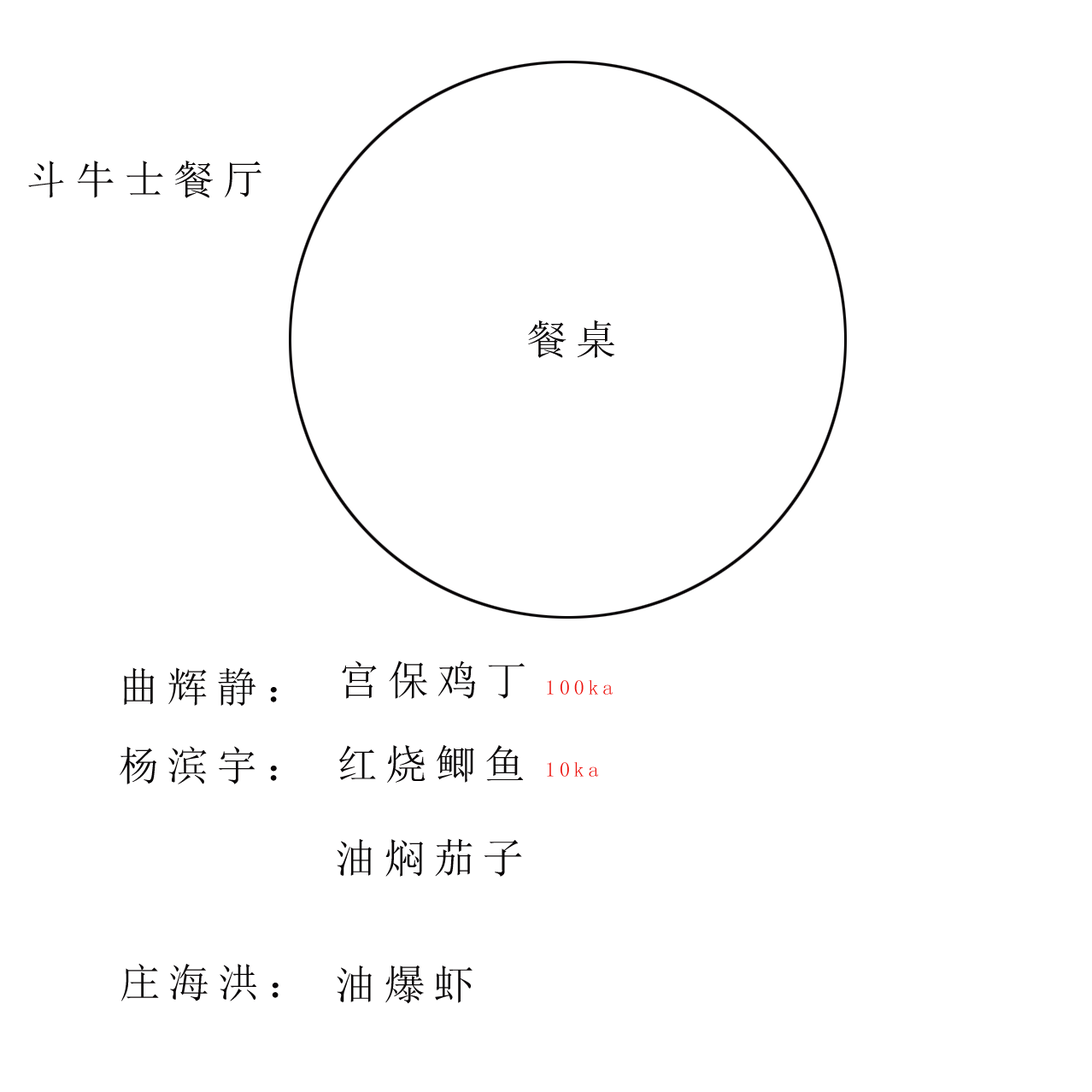
<style>
.page{position:relative;width:1092px;height:1092px;background:#ffffff}
.page>*{position:absolute;margin:0}
.t1{font:41px "SimSun";letter-spacing:0.2em;color:#090607}
.t2{font:20.5px "SimSun";letter-spacing:0.2em;color:#ec110c}
</style>
<div class="page">
<p class="t1" style="left:28px;top:160px;width:233px;height:38px">斗牛士餐厅</p>
<p class="t1" style="left:528px;top:320px;width:86px;height:38px">餐桌</p>
<p class="t1" style="left:342px;top:660px;width:183px;height:39px">宫保鸡丁</p>
<p class="t1" style="left:124px;top:667px;width:153px;height:39px">曲辉静：</p>
<p class="t2" style="left:547px;top:679px;width:66px;height:16px">100ka</p>
<p class="t1" style="left:120px;top:746px;width:157px;height:38px">杨滨宇：</p>
<p class="t1" style="left:339px;top:745px;width:185px;height:38px">红烧鲫鱼</p>
<p class="t2" style="left:547px;top:761px;width:51px;height:16px">10ka</p>
<p class="t1" style="left:337px;top:838px;width:185px;height:39px">油焖茄子</p>
<p class="t1" style="left:121px;top:963px;width:158px;height:38px">庄海洪：</p>
<p class="t1" style="left:337px;top:965px;width:136px;height:39px">油爆虾</p>
</div>
